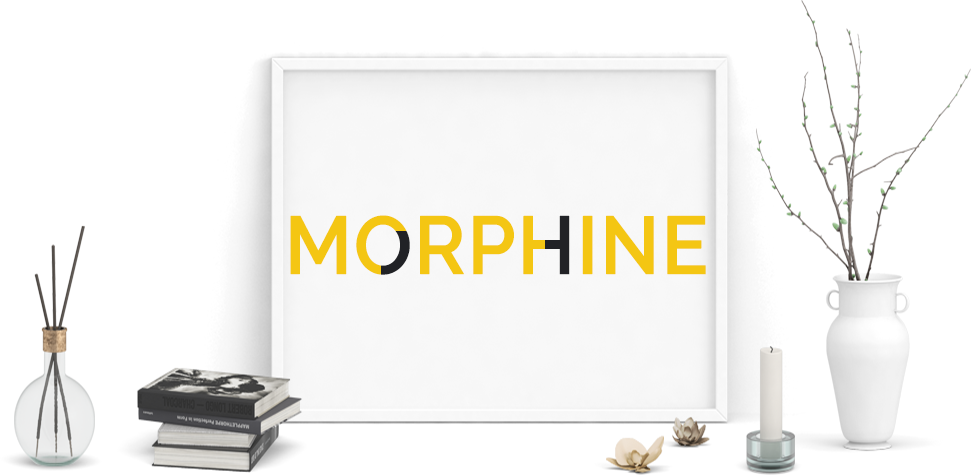
<style>
.page{position:relative;width:971px;height:475px;background:#ffffff}
.page>*{position:absolute;margin:0}
.t1{font:81px "Raleway-SemiBold";color:#f4c613;font-weight:bold;scale:0.95 1}
</style>
<div class="page">
<p class="t1" style="left:290px;top:215px;width:416px;height:60px">MORPHINE</p>
</div>
